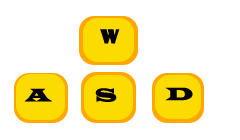
<style>
.page{position:relative;width:240px;height:140px;background:#ffffff}
.page>*{position:absolute;margin:0}
.t1{font:18.5px "ShowcardGothic-Reg";color:#000000}
.t2{font:18.5px "MyriadPro-Regular";color:#fea700}
.t3{font:18.5px "LatinWide";color:#000000}
</style>
<div class="page">
<p class="t1" style="left:100px;top:29px;width:20px;height:15px"><span class="t2"><br>         </span>W</p>
<p class="t3" style="left:24px;top:88px;width:28px;height:14px"><span class="t1"><br>       </span>A</p>
<p class="t3" style="left:95px;top:88px;width:22px;height:14px"><span class="t1"><br>       </span>S</p>
<p class="t3" style="left:165px;top:87px;width:28px;height:14px">D</p>
</div>
